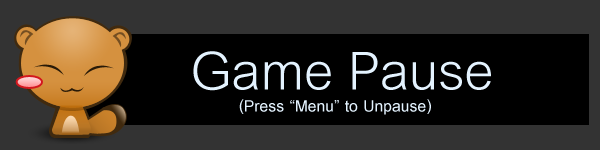
<style>
.page{position:relative;width:600px;height:150px;background:#000000}
.page>*{position:absolute;margin:0}
.t1{font:80px "CordiaUPC";color:#e4f3ff}
.t2{font:24px "CordiaUPC-Bold";color:#e4f3ff}
</style>
<div class="page">
<p class="t1" style="left:193px;top:51px;width:298px;height:40px">Game Pause</p>
<p class="t2" style="left:239px;top:99px;width:192px;height:16px">(Press “Menu” to Unpause)</p>
</div>
